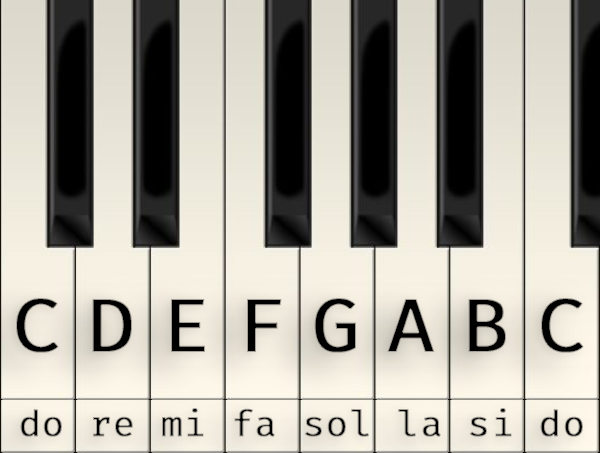
<style>
.page{position:relative;width:600px;height:453px}
.page>*{position:absolute;margin:0}
.t1{font:75.6px "FiraCode-Regular";letter-spacing:0.32em;color:#000000;font-weight:bold;scale:1.05 1}
.t2{font:36px "FiraCode-Regular";font-weight:bold;scale:1.05 1}
</style>
<div class="page">
<p class="t1" style="left:16px;top:298px;width:568px;height:55px">CDEFGABC</p>
<p class="t2" style="left:20px;top:408px;width:563px;height:29px">do re mi fa sol la si do</p>
</div>
